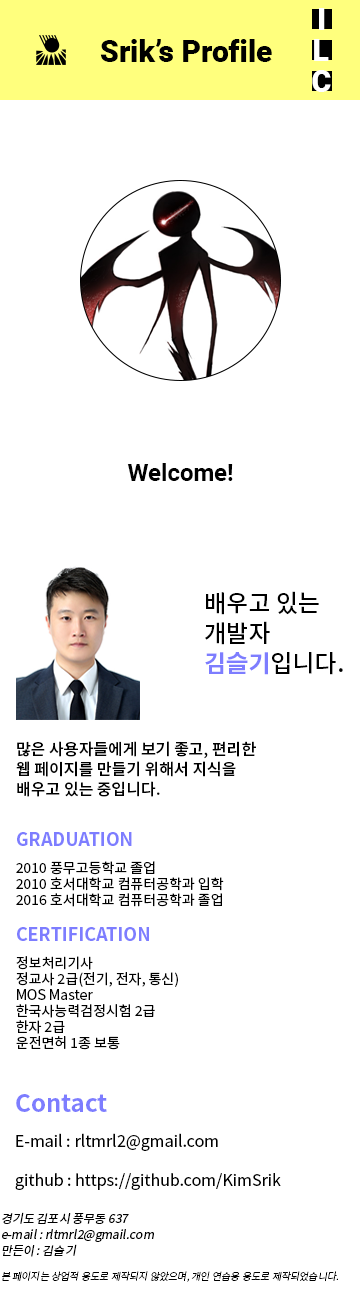
<style>
.page{position:relative;width:360px;height:1300px;background:#ffffff}
.page>*{position:absolute;margin:0}
.t1{font:30px "Roboto-Black";color:#ffffff}
.t2{font:30px "Roboto-Black";color:#000000}
.t3{font:24px "Roboto-Bold";color:#000000}
.t4{font:24px/29.9px "NotoSansKR-Medium";color:#000000}
.t5{font:24px/29.9px "NotoSansKR-Bold";color:#7d7dff}
.t6{font:16px/20px "NotoSansKR-Medium";color:#000000}
.t7{font:18px "NotoSansKR-Bold";color:#7d7dff}
.t8{font:14px/16px "NotoSansKR-Regular";color:#000000}
.t9{font:24px "NotoSansKR-Bold";color:#7d7dff}
.t10{font:16px "NotoSansKR-Regular";color:#000000}
.t11{font:12px/16px "NotoSansKR-Regular";color:#000000;font-style:italic}
.t12{font:10px "NotoSansKR-Light";color:#000000;font-style:italic}
</style>
<div class="page">
<p class="t1" style="left:319px;top:8px;width:6px;height:22px">I</p>
<p class="t1" style="left:319px;top:8px;width:6px;height:22px">I</p>
<p class="t2" style="left:100px;top:39px;width:172px;height:23px">Srik’s Profile</p>
<p class="t2" style="left:100px;top:39px;width:172px;height:23px">Srik’s Profile</p>
<p class="t1" style="left:314px;top:39px;width:15px;height:22px">L</p>
<p class="t1" style="left:314px;top:39px;width:15px;height:22px">L</p>
<p class="t1" style="left:312px;top:70px;width:19px;height:22px">C</p>
<p class="t1" style="left:312px;top:70px;width:19px;height:22px">C</p>
<p class="t3" style="left:127px;top:463px;width:106px;height:18px">Welcome!</p>
<p class="t4" style="left:205px;top:591px;width:138px;height:84px">배우고 있는<br>개발자<br><span class="t5">김슬기</span>입니다.</p>
<p class="t6" style="left:16px;top:741px;width:240px;height:56px">많은 사용자들에게 보기 좋고, 편리한<br>웹 페이지를 만들기 위해서 지식을<br>배우고 있는 중입니다.</p>
<p class="t7" style="left:17px;top:832px;width:115px;height:14px">GRADUATION</p>
<p class="t8" style="left:16px;top:861px;width:208px;height:46px">2010 풍무고등학교 졸업<br>2010 호서대학교 컴퓨터공학과 입학<br>2016 호서대학교 컴퓨터공학과 졸업</p>
<p class="t7" style="left:17px;top:927px;width:132px;height:14px">CERTIFICATION</p>
<p class="t8" style="left:16px;top:956px;width:162px;height:94px">정보처리기사<br>정교사 2급(전기, 전자, 통신)<br>MOS Master<br>한국사능력검정시험 2급<br>한자 2급<br>운전면허 1종 보통</p>
<p class="t9" style="left:16px;top:1094px;width:91px;height:18px">Contact</p>
<p class="t10" style="left:16px;top:1133px;width:202px;height:18px">E-mail : rltmrl2@gmail.com</p>
<p class="t10" style="left:15px;top:1173px;width:266px;height:17px">github : https://github.com/KimSrik</p>
<p class="t11" style="left:2px;top:1212px;width:152px;height:45px">경기도 김포시 풍무동 637<br>e-mail : rltmrl2@gmail.com<br>만든이 : 김슬기</p>
<p class="t12" style="left:2px;top:1271px;width:336px;height:11px">본 페이지는 상업적 용도로 제작되지 않았으며, 개인 연습용 용도로 제작되었습니다.</p>
</div>
